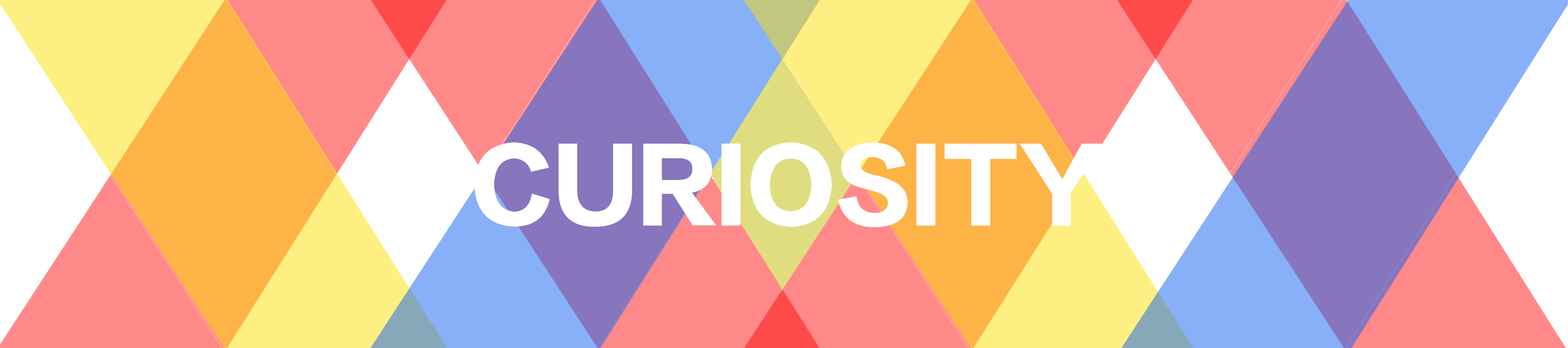
<style>
.page{position:relative;width:1568px;height:348px;background:#ff8989}
.page>*{position:absolute;margin:0}
.t1{font:95px "FZLTTHB--B51-0";color:#ffffff}
</style>
<div class="page">
<p class="t1" style="left:474px;top:142px;width:629px;height:86px">CURIOSITY</p>
</div>
